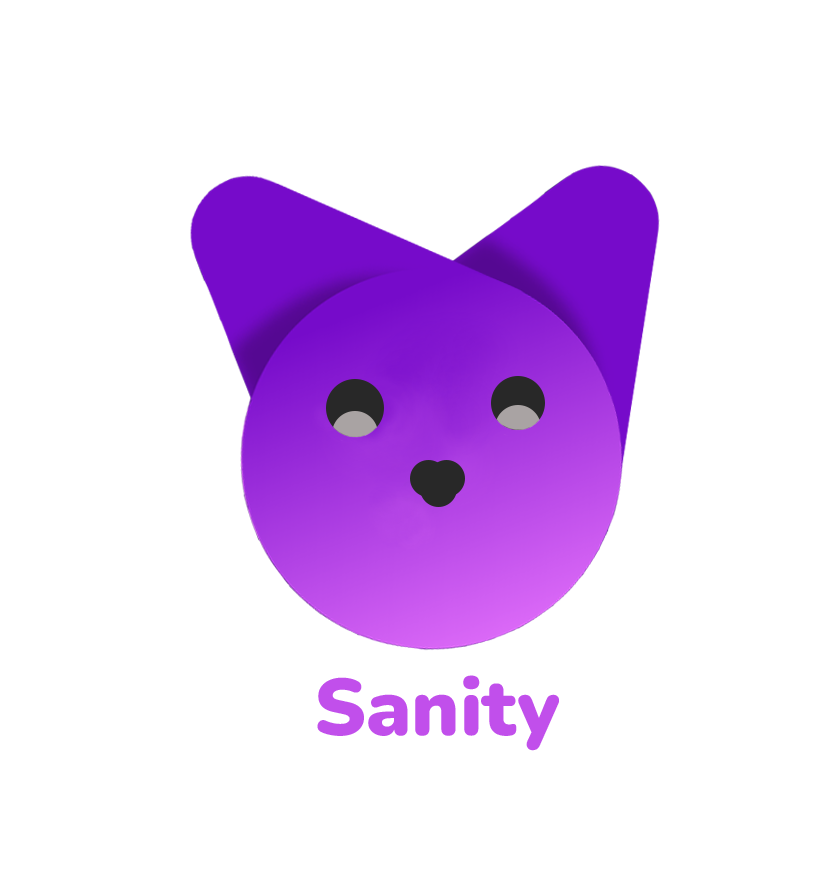
<style>
.page{position:relative;width:840px;height:892px;background:#ffffff}
.page>*{position:absolute;margin:0}
.t1{font:80px "Nunito-Black";color:#c14feb}
</style>
<div class="page">
<p class="t1" style="left:317px;top:675px;width:242px;height:76px">Sanity</p>
</div>
